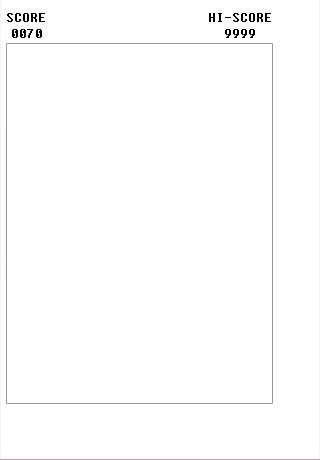
<style>
.page{position:relative;width:320px;height:460px;background:#ffffff}
.page>*{position:absolute;margin:0}
.t1{font:12px/16px "Fixedsys";color:#000000}
</style>
<div class="page">
<p class="t1" style="left:7px;top:13px;width:38px;height:25px;text-align:center">SCORE<br>0070</p>
<p class="t1" style="left:209px;top:13px;width:62px;height:25px;text-align:center">HI-SCORE<br>9999</p>
</div>
